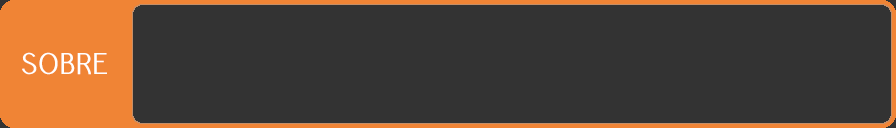
<style>
.page{position:relative;width:896px;height:128px;background:#333333}
.page>*{position:absolute;margin:0}
.t1{font:30px "Pfennig";color:#ffffff}
</style>
<div class="page">
<p class="t1" style="left:22px;top:52px;width:85px;height:23px">SOBRE</p>
</div>
